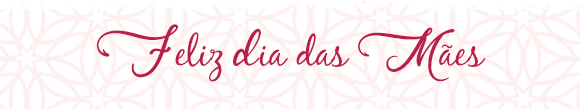
<style>
.page{position:relative;width:580px;height:109px;background:#ffffff}
.page>*{position:absolute;margin:0}
.t1{font:39.5px "BlackJack";color:#bb1e49}
.t2{font:39.5px "SkallightMillagraRegular";color:#bb1e49}
</style>
<div class="page">
<p class="t1" style="left:96px;top:24px;width:390px;height:58px"><span class="t2">F</span>eliz <span class="t2">d</span>ia das <span class="t2">M</span>ães</p>
</div>
